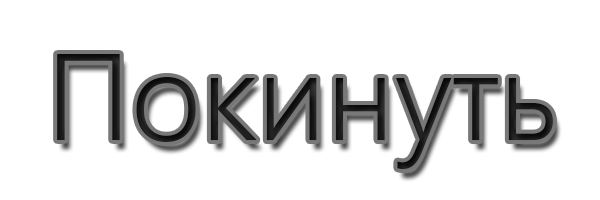
<style>
.page{position:relative;width:600px;height:200px;background:#ffffff}
.page>*{position:absolute;margin:0}
.t1{font:120px "MalgunGothic-Semilight";color:#181818}
</style>
<div class="page">
<p class="t1" style="left:57px;top:54px;width:496px;height:115px">Покинуть</p>
</div>
